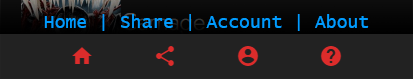
<style>
.page{position:relative;width:413px;height:79px;background:#222222}
.page>*{position:absolute;margin:0}
.t1{font:18px "LucidaConsole";color:#009cff}
</style>
<div class="page">
<p class="t1" style="left:44px;top:14px;width:325px;height:17px">Home | Share | Account | About</p>
</div>
